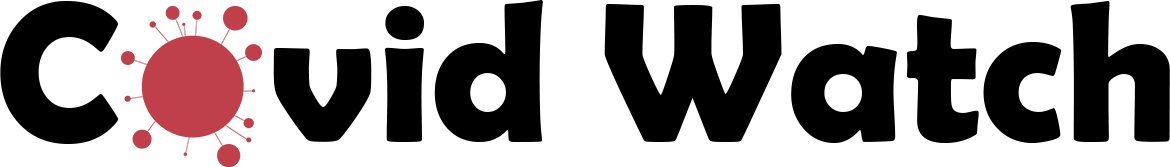
<style>
.page{position:relative;width:1170px;height:167px;background:#ffffff}
.page>*{position:absolute;margin:0}
.t1{font:200px "BerlinSansFBDemi-Bold";color:#000000}
</style>
<div class="page">
<p class="t1" style="left:0px;top:0px;width:1170px;height:144px">C   vid Watch</p>
</div>
